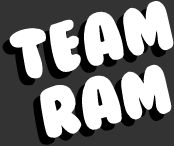
<style>
.page{position:relative;width:174px;height:146px;background:#333333}
.page>*{position:absolute;margin:0}
.t1{font:65px "BubbleGum";color:#ffffff}
</style>
<div class="page">
<p class="t1" style="left:8px;top:0px;width:166px;height:138px;text-align:center;rotate:-12deg">team<br>ram</p>
</div>
